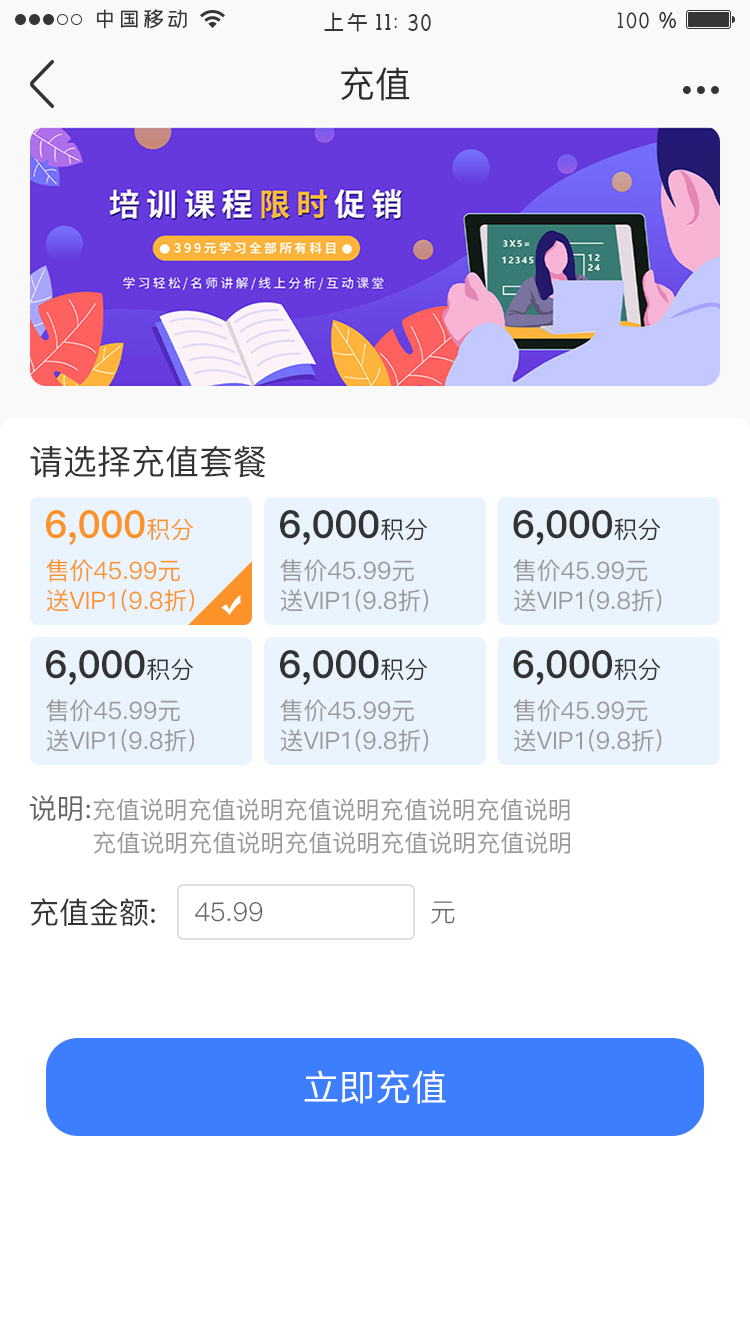
<style>
.page{position:relative;width:750px;height:1334px;background:#ffffff}
.page>*{position:absolute;margin:0}
.t1{font:36px "PingFang-SC-Medium";color:#2c2c2c;text-transform:uppercase}
.t2{font:34px "PingFang-SC-Medium";color:#333333}
.t3{font:38px "PingFang-SC-Heavy";color:#fb9329}
.t4{font:24px "PingFang-SC-Medium";color:#fb9329}
.t5{font:38px "PingFang-SC-Heavy";color:#333333}
.t6{font:24px "PingFang-SC-Medium";color:#333333}
.t7{font:24px/30px "PingFang-SC-Medium";color:#fb9329}
.t8{font:24px/30px "PingFang-SC-Medium";color:#999999}
.t9{font:24px/33px "PingFang-SC-Medium";color:#999999}
.t10{font:28px/33px "PingFang-SC-Medium";color:#666666}
.t11{font:30px "PingFang-SC-Medium";color:#333333}
.t12{font:26px "PingFang-SC-Regular";color:#666666}
.t13{font:36px "PingFang-SC-Medium";color:#ffffff}
</style>
<div class="page">
<p class="t1" style="left:341px;top:67px;width:69px;height:34px">充值</p>
<p class="t2" style="left:30px;top:445px;width:236px;height:33px">请选择充值套餐</p>
<p class="t3" style="left:46px;top:510px;width:147px;height:35px">6,000<span class="t4">积分</span></p>
<p class="t5" style="left:280px;top:510px;width:147px;height:35px">6,000<span class="t6">积分</span></p>
<p class="t5" style="left:513px;top:510px;width:148px;height:35px">6,000<span class="t6">积分</span></p>
<p class="t7" style="left:46px;top:559px;width:148px;height:53px">售价45.99元<br>送VIP1(9.8折)</p>
<p class="t8" style="left:280px;top:559px;width:148px;height:53px">售价45.99元<br>送VIP1(9.8折)</p>
<p class="t8" style="left:513px;top:559px;width:149px;height:53px">售价45.99元<br>送VIP1(9.8折)</p>
<p class="t5" style="left:46px;top:650px;width:147px;height:35px">6,000<span class="t6">积分</span></p>
<p class="t5" style="left:280px;top:650px;width:147px;height:35px">6,000<span class="t6">积分</span></p>
<p class="t5" style="left:513px;top:650px;width:148px;height:35px">6,000<span class="t6">积分</span></p>
<p class="t8" style="left:46px;top:699px;width:148px;height:53px">售价45.99元<br>送VIP1(9.8折)</p>
<p class="t8" style="left:280px;top:699px;width:148px;height:53px">售价45.99元<br>送VIP1(9.8折)</p>
<p class="t8" style="left:513px;top:699px;width:149px;height:53px">售价45.99元<br>送VIP1(9.8折)</p>
<p class="t9" style="left:29px;top:795px;width:541px;height:59px"><span class="t10">说明:</span>充值说明充值说明充值说明充值说明充值说明<br>        充值说明充值说明充值说明充值说明充值说明</p>
<p class="t11" style="left:31px;top:898px;width:124px;height:28px">充值金额:</p>
<p class="t12" style="left:195px;top:901px;width:68px;height:21px">45.99</p>
<p class="t12" style="left:431px;top:901px;width:24px;height:23px">元</p>
<p class="t13" style="left:304px;top:1070px;width:142px;height:34px">立即充值</p>
</div>
